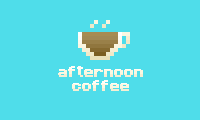
<style>
.page{position:relative;width:200px;height:120px;background:#4fddea}
.page>*{position:absolute;margin:0}
.t1{font:12px "Minecraftia-Regular";color:#fbf7e1;font-weight:bold}
</style>
<div class="page">
<p class="t1" style="left:58px;top:66px;width:85px;height:25px;text-align:center">afternoon<br>coffee</p>
</div>
